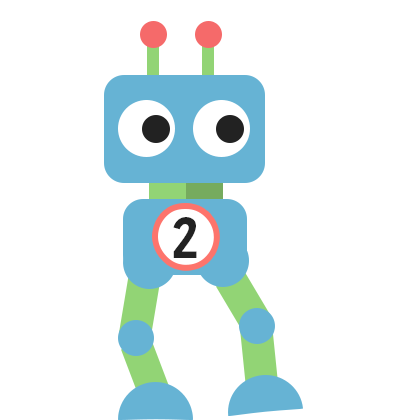
<style>
.page{position:relative;width:400px;height:420px;background:#ffffff}
.page>*{position:absolute;margin:0}
.t1{font:60px "KGWhattheTeacherWants";color:#222222}
</style>
<div class="page">
<p class="t1" style="left:173px;top:217px;width:24px;height:41px">2</p>
</div>
